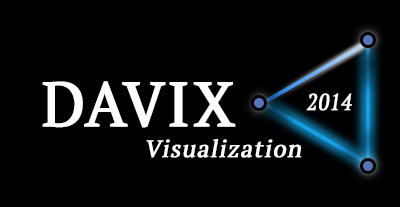
<style>
.page{position:relative;width:400px;height:207px;background:#000000}
.page>*{position:absolute;margin:0}
.t1{font:62.8px "PTSerif-Regular";letter-spacing:0.025em;color:#ffffff;font-weight:bold}
.t2{font:23px "PTSerif-Regular";letter-spacing:0.025em;color:#fdfdfd;font-weight:bold;font-style:italic;scale:0.85 1}
.t3{font:24px "PTSerif-Regular";letter-spacing:0.025em;color:#ffffff;font-weight:bold;font-style:italic}
</style>
<div class="page">
<p class="t1" style="left:42px;top:81px;width:194px;height:47px">DAVIX</p>
<p class="t2" style="left:306px;top:93px;width:46px;height:18px">2014</p>
<p class="t3" style="left:146px;top:139px;width:156px;height:19px">Visualization</p>
</div>
